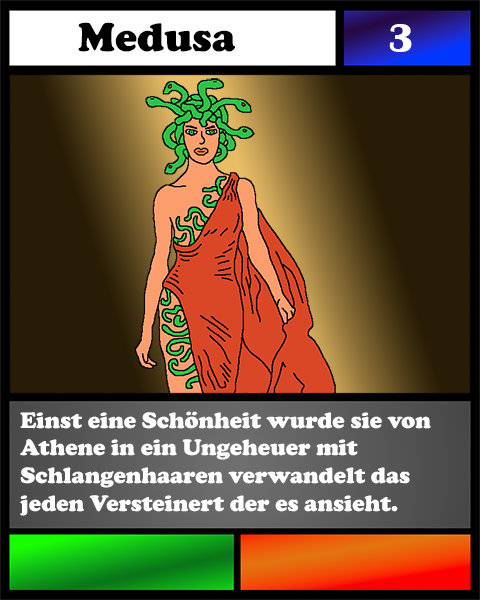
<style>
.page{position:relative;width:480px;height:600px}
.page>*{position:absolute;margin:0}
.t1{font:41.7px "CooperBlack";color:#000000}
.t2{font:41.7px "BritannicBold";color:#ffffff}
.t3{font:23.1px "CooperBlack";color:#ffffff}
</style>
<div class="page">
<p class="t1" style="left:78px;top:22px;width:157px;height:30px">Medusa</p>
<p class="t2" style="left:389px;top:24px;width:23px;height:28px">3</p>
<p class="t3" style="left:20px;top:411px;width:411px;height:105px">Einst eine Schönheit wurde sie von Athene in ein Ungeheuer mit Schlangenhaaren verwandelt das <br>jeden Versteinert der es ansieht.</p>
</div>
